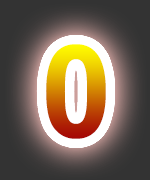
<style>
.page{position:relative;width:150px;height:180px}
.page>*{position:absolute;margin:0}
.t1{font:128.8px "Arial-BoldMT"}
</style>
<div class="page">
<p class="t1" style="left:46px;top:44px;width:60px;height:95px">0</p>
</div>
